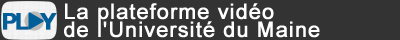
<style>
.page{position:relative;width:400px;height:40px;background:#333333}
.page>*{position:absolute;margin:0}
.t1{font:21.3px/18px "ArialMT";letter-spacing:0.04em;color:#ffffff;font-weight:bold}
.t2{font:23px "HelveticaNeue-Bold";letter-spacing:-0.1em;color:#005e98;font-weight:bold}
.t3{font:23px "HelveticaNeue-Bold";letter-spacing:-0.44em;color:#005e98;font-weight:bold}
.t4{font:23px "HelveticaNeue-Bold";color:#005e98;font-weight:bold}
</style>
<div class="page">
<p class="t1" style="left:64px;top:3px;width:256px;height:35px">La plateforme vidéo <br>de l'Université du Maine</p>
<p class="t2" style="left:3px;top:13px;width:54px;height:17px">P<span class="t3">L</span><span class="t4">   Y</span></p>
</div>
